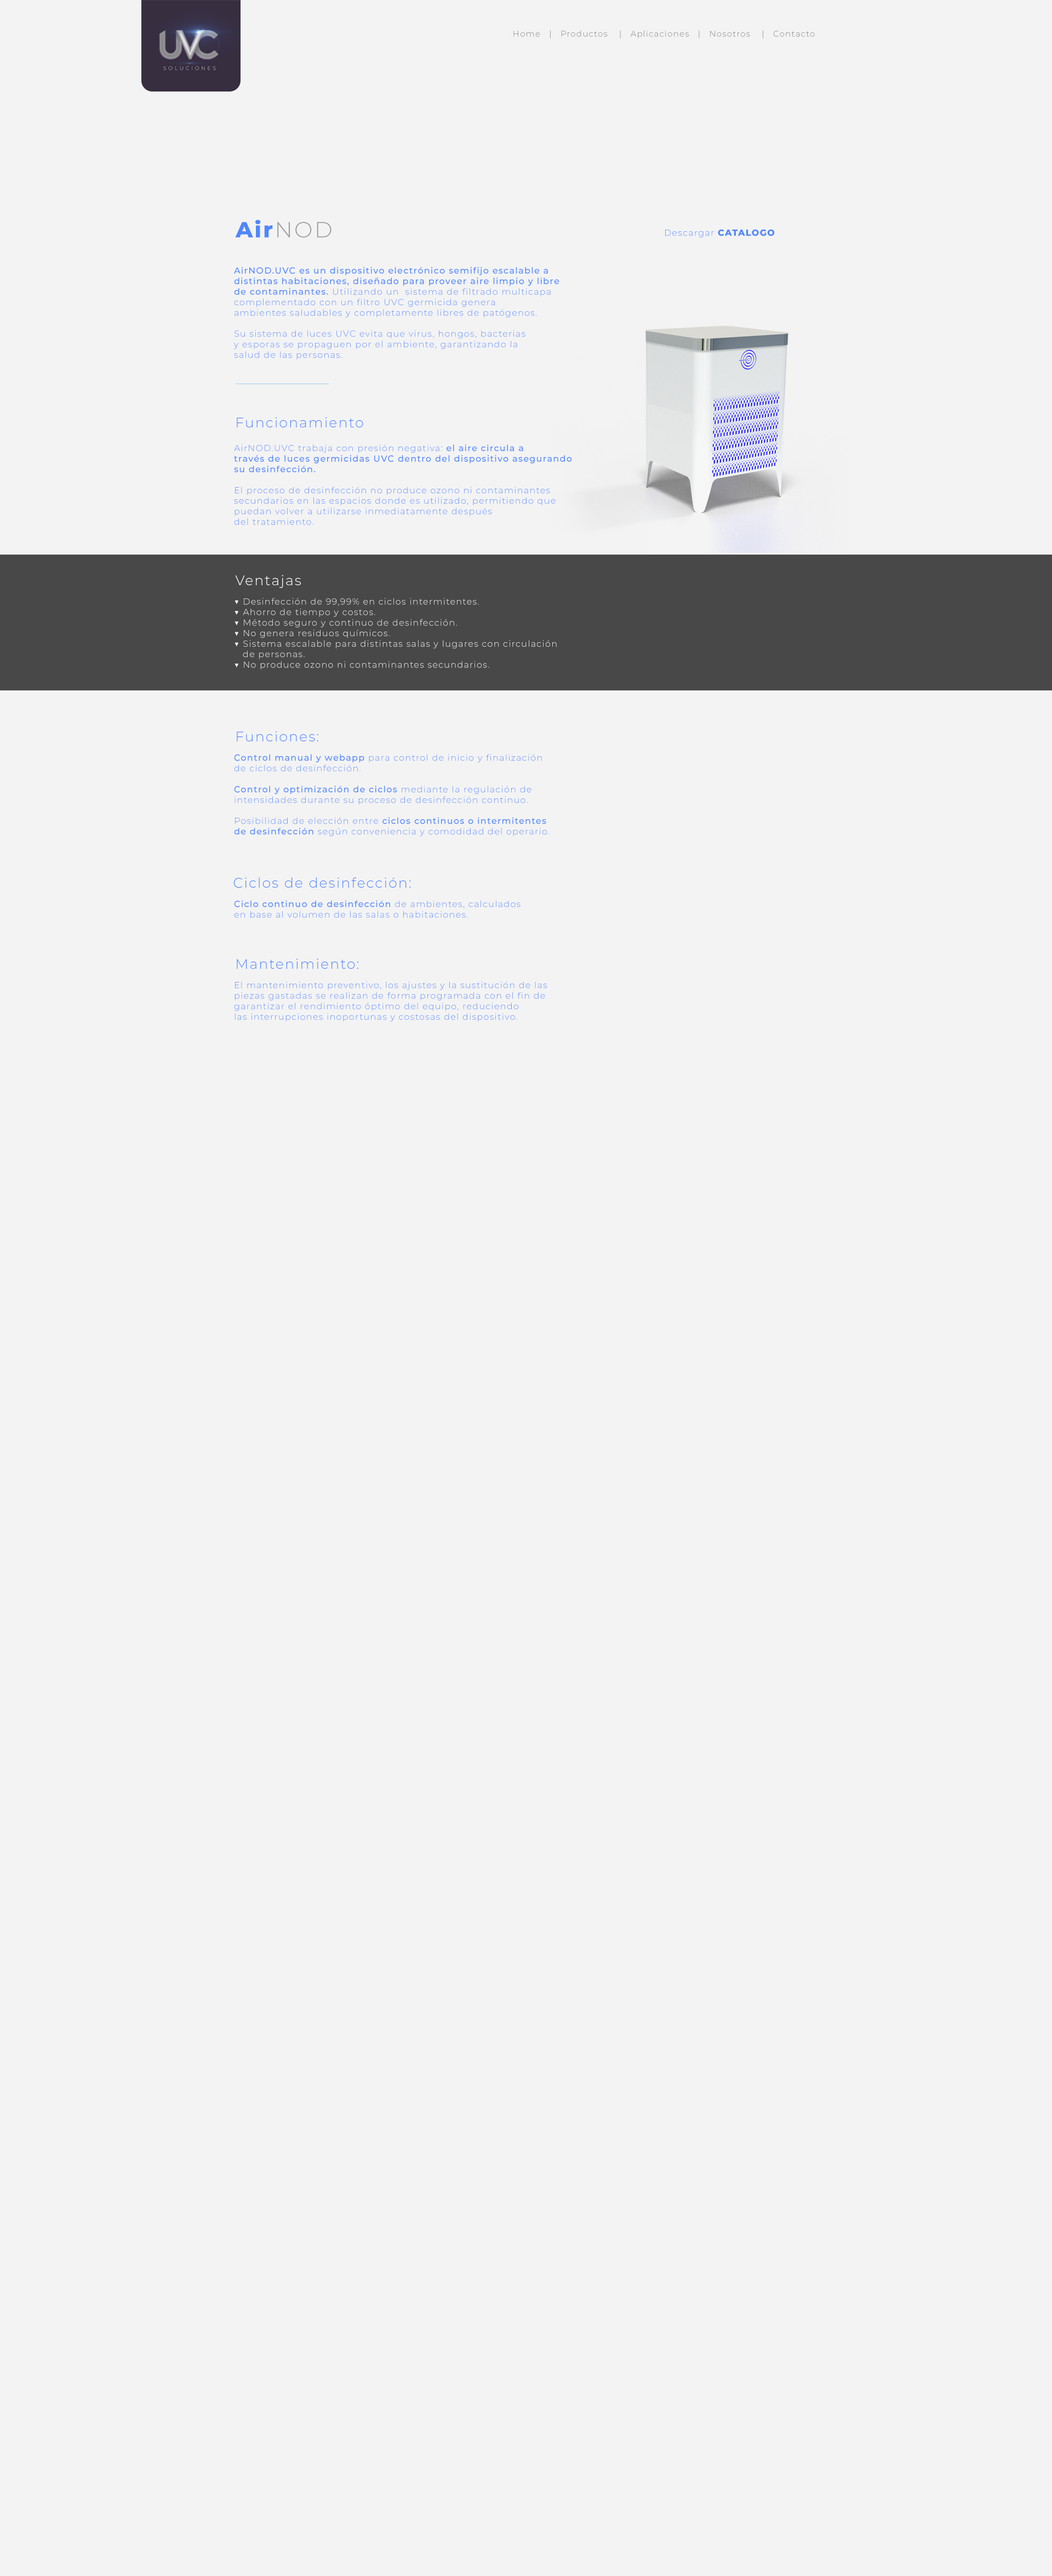
<style>
.page{position:relative;width:1052px;height:2576px;background:#f3f3f3}
.page>*{position:absolute;margin:0}
.t1{font:8.2px "Montserrat-Light";letter-spacing:0.08em;color:#7f7b7b}
.t2{font:21.9px "Montserrat-ExtraBold";letter-spacing:0.08em;color:#4f87fd}
.t3{font:21.9px "Montserrat-Light";letter-spacing:0.08em;color:#9c9c9d}
.t4{font:8.8px "Montserrat-Light";letter-spacing:0.08em;color:#4f87fd}
.t5{font:8.8px "Montserrat-ExtraBold";letter-spacing:0.08em;color:#4f87fd}
.t6{font:8.8px "Montserrat-Medium";letter-spacing:0.08em;color:#4f87fd}
.t7{font:13.8px "Montserrat-Light";letter-spacing:0.08em;color:#4f87fd}
.t8{font:13.8px "Montserrat-Light";letter-spacing:0.08em;color:#ffffff}
.t9{font:8.8px "Montserrat-Light";letter-spacing:0.08em;color:#f3f3f3}
</style>
<div class="page">
<p class="t1" style="left:513px;top:30px;width:302px;height:8px">Home   |   Productos    |   Aplicaciones   |   Nosotros    |   Contacto</p>
<p class="t2" style="left:235px;top:220px;width:97px;height:18px">Air<span class="t3">NOD</span></p>
<p class="t4" style="left:665px;top:229px;width:110px;height:9px">Descargar <span class="t5">CATALOGO</span></p>
<p class="t4" style="left:233px;top:267px;width:326px;height:92px"><span class="t6">AirNOD.UVC es un dispositivo electrónico semifijo escalable a <br>distintas habitaciones, diseñado para proveer aire limpio y libre <br>de contaminantes. </span>Utilizando un  sistema de filtrado multicapa <br>complementado con un filtro UVC germicida genera <br>ambientes saludables y completamente libres de patógenos.<br><br>Su sistema de luces UVC evita que virus, hongos, bacterias <br>y esporas se propaguen por el ambiente, garantizando la <br>salud de las personas.</p>
<p class="t7" style="left:237px;top:417px;width:126px;height:10px">Funcionamiento</p>
<p class="t4" style="left:234px;top:444px;width:338px;height:81px">AirNOD.UVC trabaja con presión negativa: <span class="t6">el aire circula a <br>través de luces germicidas UVC dentro del dispositivo asegurando <br>su desinfección.<br><br></span>El proceso de desinfección no produce ozono ni contaminantes <br>secundarios en las espacios donde es utilizado, permitiendo que <br>puedan volver a utilizarse inmediatamente después <br>del tratamiento.</p>
<p class="t8" style="left:235px;top:575px;width:66px;height:13px">Ventajas</p>
<p class="t9" style="left:235px;top:598px;width:322px;height:72px">▼ Desinfección de 99,99% en ciclos intermitentes.<br>▼ Ahorro de tiempo y costos.<br>▼ Método seguro y continuo de desinfección.<br>▼ No genera residuos químicos.<br>▼ Sistema escalable para distintas salas y lugares con circulación <br>   de personas. <br>▼ No produce ozono ni contaminantes secundarios.</p>
<p class="t7" style="left:237px;top:731px;width:81px;height:10px">Funciones:</p>
<p class="t4" style="left:234px;top:754px;width:315px;height:82px"><span class="t6">Control manual y webapp </span>para control de inicio y finalización <br>de ciclos de desinfección.<br><span class="t6"><br>Control y optimización de ciclos </span>mediante la regulación de <br>intensidades durante su proceso de desinfección continuo.<br><br>Posibilidad de elección entre <span class="t6">ciclos continuos o intermitentes <br>de desinfección </span>según conveniencia y comodidad del operario.</p>
<p class="t7" style="left:233px;top:877px;width:178px;height:11px">Ciclos de desinfección:</p>
<p class="t4" style="left:234px;top:900px;width:287px;height:18px"><span class="t6">Ciclo continuo de desinfección </span>de ambientes, calculados <br>en base al volumen de las salas o habitaciones.</p>
<p class="t7" style="left:237px;top:958px;width:121px;height:11px">Mantenimiento:</p>
<p class="t4" style="left:234px;top:981px;width:313px;height:40px">El mantenimiento preventivo, los ajustes y la sustitución de las <br>piezas gastadas se realizan de forma programada con el fin de <br>garantizar el rendimiento óptimo del equipo, reduciendo<br>las interrupciones inoportunas y costosas del dispositivo.</p>
</div>
